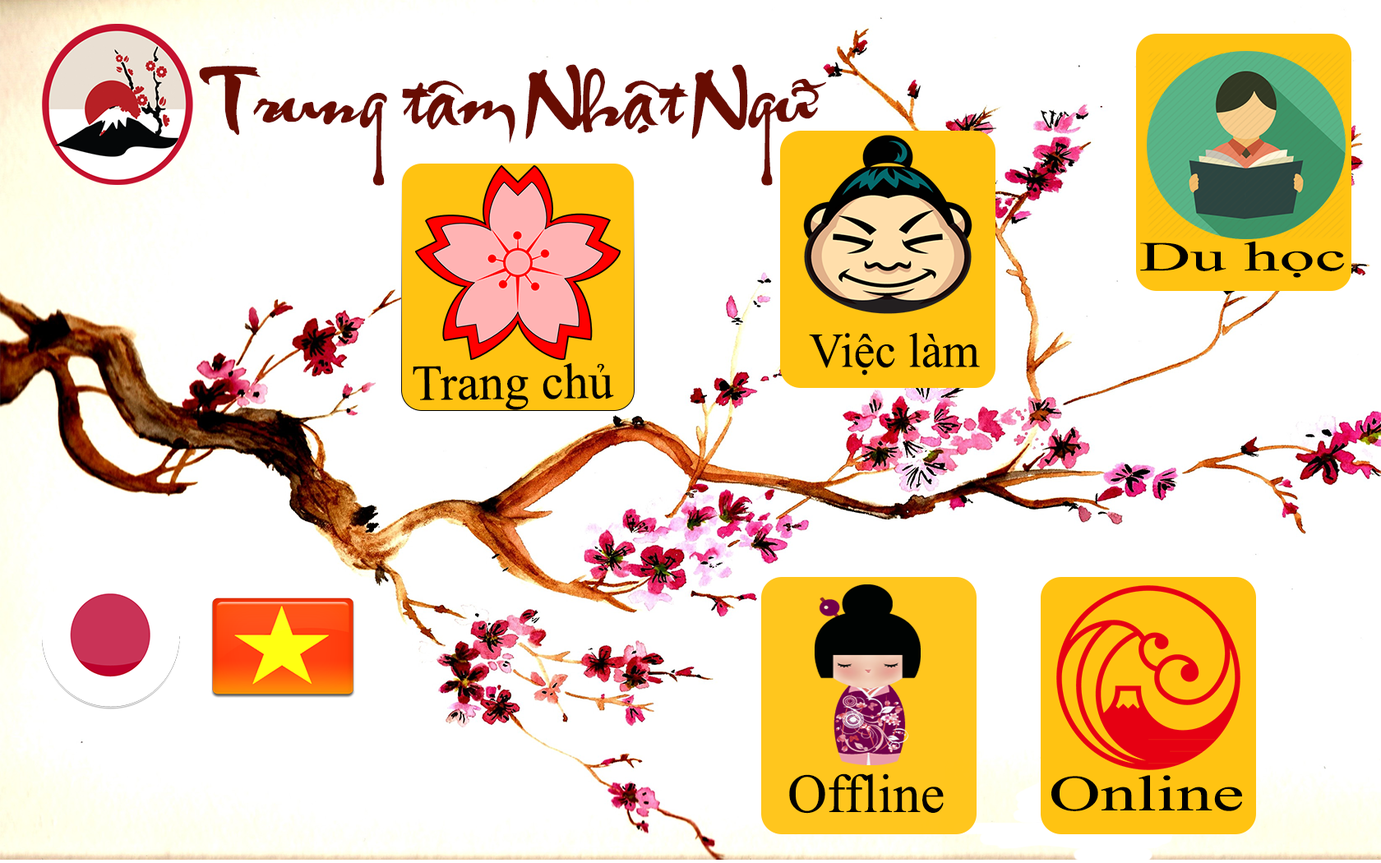
<style>
.page{position:relative;width:1381px;height:863px;background:#ffffff}
.page>*{position:absolute;margin:0}
.t1{font:66.3px "VNI-Thufap2-Normal";color:#680d02;scale:1.11 1}
.t2{font:41.6px "TimesNewRomanPSMT";color:#000000;scale:1.71 1}
.t3{font:48.9px "TimesNewRomanPSMT";color:#000000}
.t4{font:50.5px "TimesNewRomanPSMT";color:#000000}
.t5{font:54.8px "TimesNewRomanPSMT";color:#000000}
.t6{font:50.3px "TimesNewRomanPSMT";color:#000000;scale:1.43 1}
</style>
<div class="page">
<p class="t1" style="left:199px;top:64px;width:627px;height:122px">Trung taâm Nhaät Ngöõ</p>
<p class="t2" style="left:1140px;top:241px;width:205px;height:37px">Du học</p>
<p class="t3" style="left:809px;top:333px;width:171px;height:43px">Việc làm</p>
<p class="t4" style="left:413px;top:363px;width:201px;height:47px;rotate:-1deg">Trang chủ</p>
<p class="t5" style="left:789px;top:774px;width:155px;height:40px">Offline</p>
<p class="t6" style="left:1052px;top:775px;width:190px;height:36px">Online</p>
</div>
